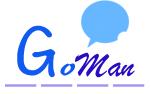
<style>
.page{position:relative;width:151px;height:94px;background:#ffffff}
.page>*{position:absolute;margin:0}
.t1{font:36px "STXingkai";color:#2a0cc1}
.t2{font:72px "HannotateSC-W5";color:#105af0}
.t3{font:36px "STBaoli-SC-Regular";color:#105af0}
</style>
<div class="page">
<p class="t1" style="left:17px;top:25px;width:118px;height:53px"><span class="t2">G</span><span class="t3">o</span>Man</p>
</div>
